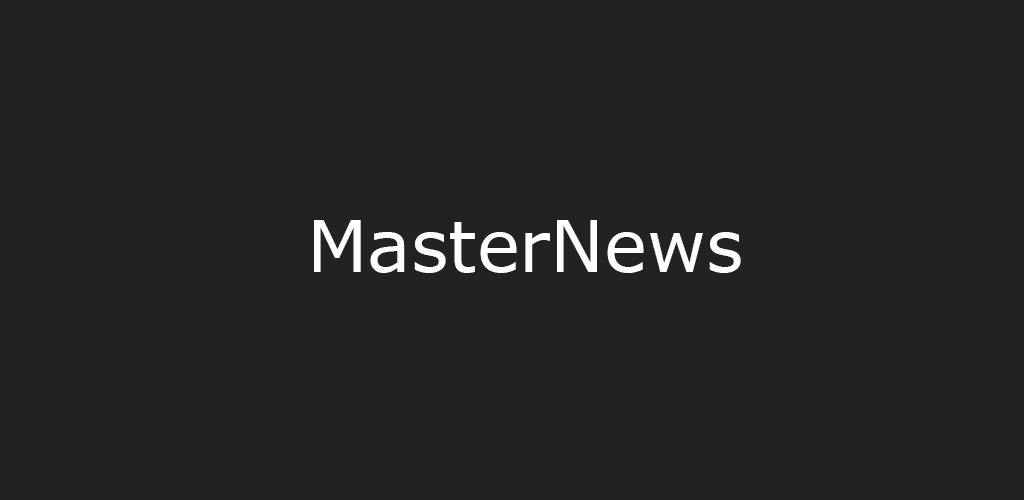
<style>
.page{position:relative;width:1024px;height:500px;background:#222222}
.page>*{position:absolute;margin:0}
.t1{font:72px "Verdana";color:#ffffff}
</style>
<div class="page">
<p class="t1" style="left:314px;top:220px;width:427px;height:53px">MasterNews</p>
</div>
